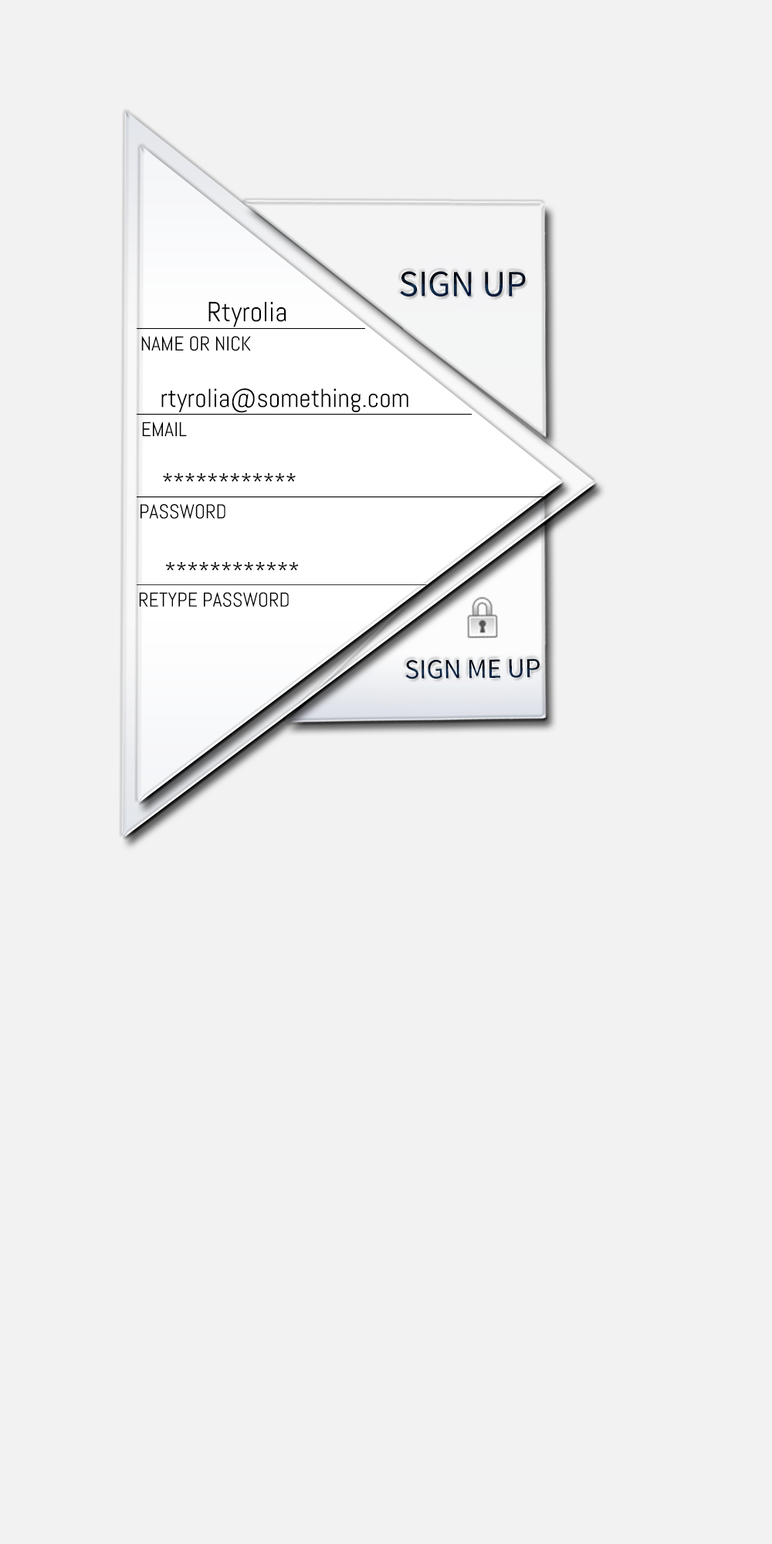
<style>
.page{position:relative;width:772px;height:1544px;background:#f2f2f2}
.page>*{position:absolute;margin:0}
.t1{font:37.1px "SourceSansPro-Regular"}
.t2{font:27.8px "Abel-Regular";color:#000000}
.t3{font:20.1px "Abel-Regular";color:#000000}
.t4{font:26.3px "Abel-Regular";color:#000000}
.t5{font:23.2px "Abel-Regular";color:#000000}
.t6{font:27.7px "SourceSansPro-Regular"}
</style>
<div class="page">
<p class="t1" style="left:400px;top:271px;width:126px;height:26px">SIGN UP</p>
<p class="t2" style="left:208px;top:302px;width:78px;height:25px">Rtyrolia</p>
<p class="t3" style="left:141px;top:336px;width:110px;height:15px">NAME OR NICK</p>
<p class="t4" style="left:161px;top:388px;width:247px;height:25px">rtyrolia@something.com</p>
<p class="t3" style="left:142px;top:422px;width:45px;height:14px">EMAIL</p>
<p class="t5" style="left:163px;top:473px;width:133px;height:9px">************</p>
<p class="t3" style="left:141px;top:504px;width:84px;height:15px">PASSWORD</p>
<p class="t5" style="left:165px;top:562px;width:134px;height:9px">************</p>
<p class="t3" style="left:139px;top:592px;width:150px;height:15px">RETYPE PASSWORD</p>
<p class="t6" style="left:405px;top:659px;width:135px;height:20px;rotate:-1deg">SIGN ME UP</p>
</div>
